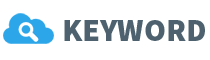
<style>
.page{position:relative;width:210px;height:60px;background:#ffffff}
.page>*{position:absolute;margin:0}
.t1{font:32px "SourceSansPro-Black";color:#4d626e}
</style>
<div class="page">
<p class="t1" style="left:64px;top:20px;width:141px;height:21px">KEYWORD</p>
</div>
